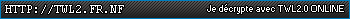
<style>
.page{position:relative;width:350px;height:19px;background:#1f1f1f}
.page>*{position:absolute;margin:0}
.t1{font:12px "CourierNewPSMT";color:#ffffff}
.t2{font:9px "Small Fonts";color:#ffffff}
</style>
<div class="page">
<p class="t1" style="left:5px;top:5px;width:119px;height:9px">HTTP://TWL2.FR.NF</p>
<p class="t2" style="left:207px;top:4px;width:137px;height:10px">Je décrypte avec TWL2.0 ONLINE</p>
</div>
